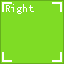
<style>
.page{position:relative;width:64px;height:64px;background:#7fdc25}
.page>*{position:absolute;margin:0}
.t1{font:10px "SourceCodePro-Regular";color:#ffffff}
</style>
<div class="page">
<p class="t1" style="left:6px;top:4px;width:28px;height:10px">Right</p>
</div>
